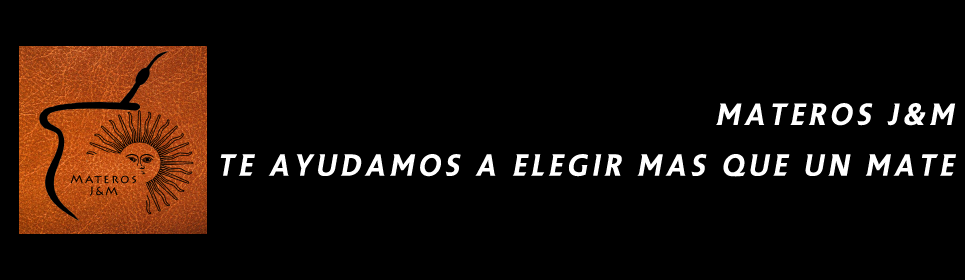
<style>
.page{position:relative;width:965px;height:280px;background:#000000}
.page>*{position:absolute;margin:0}
.t1{font:29.2px/50.9px "PremierLeague";letter-spacing:0.16em;color:#ffffff;font-style:italic}
</style>
<div class="page">
<p class="t1" style="left:220px;top:103px;width:736px;height:74px;text-align:right">MATEROS J&amp;M<br>TE AYUDAMOS A ELEGIR MAS QUE UN MATE</p>
</div>
